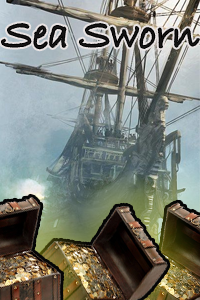
<style>
.page{position:relative;width:200px;height:300px}
.page>*{position:absolute;margin:0}
.t1{font:42.6px "BradleyHandITC";color:#151414}
</style>
<div class="page">
<p class="t1" style="left:2px;top:24px;width:197px;height:25px">Sea Sworn</p>
</div>
